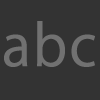
<style>
.page{position:relative;width:100px;height:100px;background:#333333}
.page>*{position:absolute;margin:0}
.t1{font:56px "KozGoPr6N-Regular";letter-spacing:0.01em;color:#717171;font-weight:bold}
</style>
<div class="page">
<p class="t1" style="left:4px;top:21px;width:91px;height:46px">abc</p>
</div>
